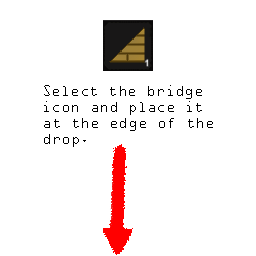
<style>
.page{position:relative;width:256px;height:256px;background:#ffffff}
.page>*{position:absolute;margin:0}
.t1{font:13.3px "OCRAStd";color:#000000}
</style>
<div class="page">
<p class="t1" style="left:44px;top:85px;width:169px;height:62px">Select the bridge<br>icon and place it<br>at the edge of the<br>drop.</p>
</div>
